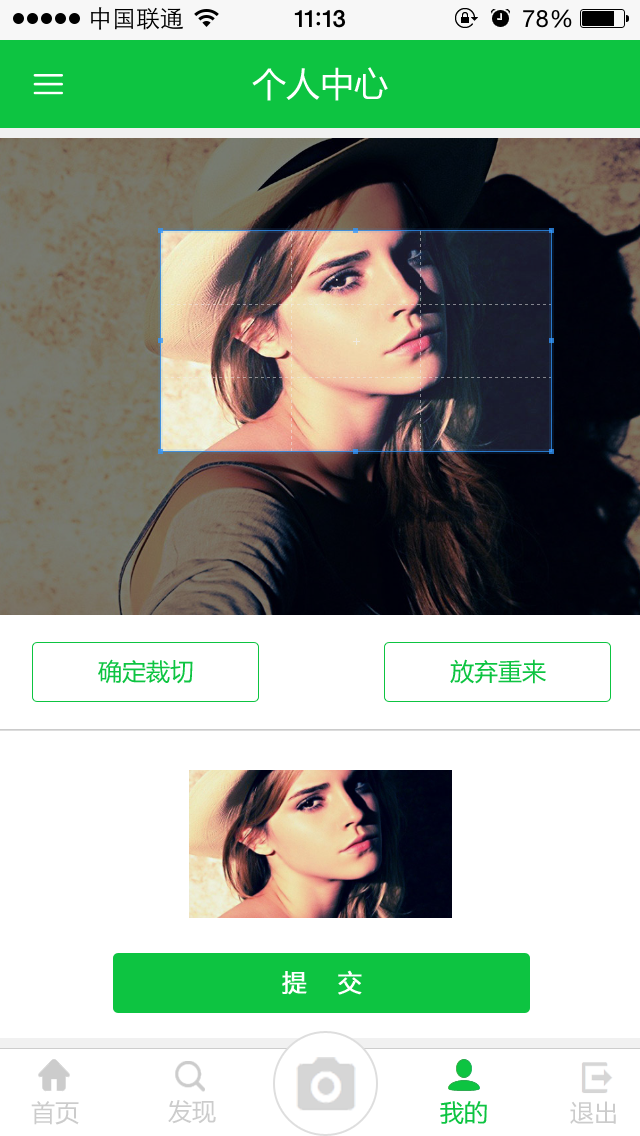
<style>
.page{position:relative;width:640px;height:1136px;background:#ffffff}
.page>*{position:absolute;margin:0}
.t1{font:34px "MicrosoftYaHei";color:#ffffff}
.t2{font:24px "MicrosoftYaHei";color:#0dc441}
.t3{font:24px "MicrosoftYaHei";color:#ffffff;font-weight:bold}
.t4{font:24px "MicrosoftYaHei";color:#cccccc}
</style>
<div class="page">
<p class="t1" style="left:252px;top:67px;width:136px;height:34px">个人中心</p>
<p class="t2" style="left:98px;top:659px;width:95px;height:25px">确定裁切</p>
<p class="t2" style="left:450px;top:659px;width:96px;height:25px">放弃重来</p>
<p class="t3" style="left:282px;top:970px;width:80px;height:25px">提    交</p>
<p class="t4" style="left:31px;top:1101px;width:48px;height:24px">首页</p>
<p class="t4" style="left:168px;top:1100px;width:48px;height:24px">发现</p>
<p class="t2" style="left:440px;top:1101px;width:47px;height:23px">我的</p>
<p class="t4" style="left:570px;top:1101px;width:46px;height:23px">退出</p>
</div>
